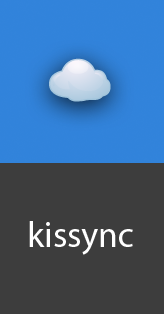
<style>
.page{position:relative;width:164px;height:314px;background:#3d3d3d}
.page>*{position:absolute;margin:0}
.t1{font:36px "MyriadPro-Regular";color:#ffffff}
</style>
<div class="page">
<p class="t1" style="left:29px;top:221px;width:104px;height:34px">kissync</p>
</div>
